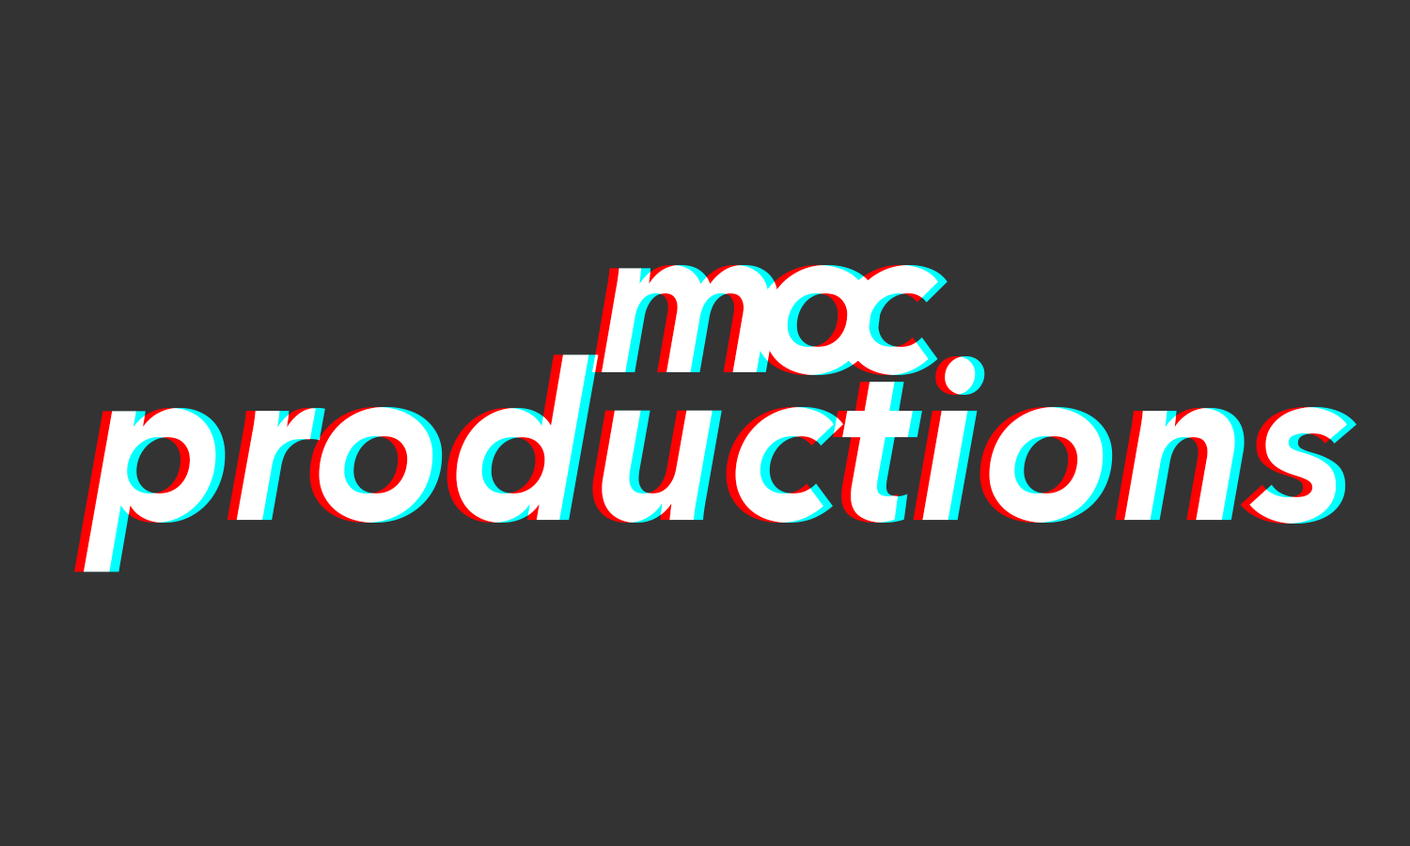
<style>
.page{position:relative;width:1410px;height:846px;background:#333333}
.page>*{position:absolute;margin:0}
.t1{font:209.3px "AvenirNext-BoldItalic";color:#ffffff}
.t2{font:219.2px "AvenirNext-BoldItalic";color:#ffffff}
</style>
<div class="page">
<p class="t1" style="left:592px;top:265px;width:177px;height:107px">m</p>
<p class="t1" style="left:601px;top:265px;width:177px;height:107px">m</p>
<p class="t1" style="left:755px;top:265px;width:116px;height:110px">o</p>
<p class="t1" style="left:764px;top:265px;width:117px;height:110px">o</p>
<p class="t1" style="left:836px;top:265px;width:102px;height:110px">c</p>
<p class="t1" style="left:846px;top:265px;width:101px;height:110px">c</p>
<p class="t2" style="left:74px;top:354px;width:1274px;height:218px">productions</p>
<p class="t2" style="left:84px;top:354px;width:1273px;height:218px">productions</p>
</div>
